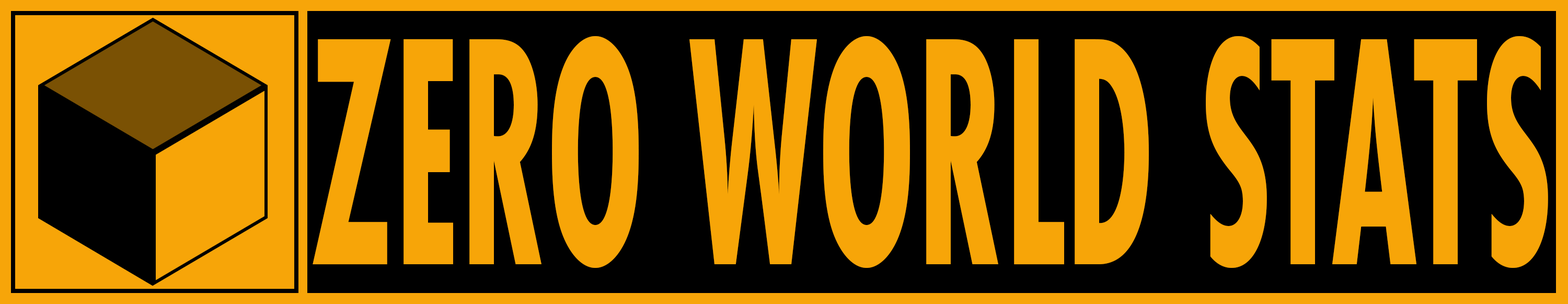
<style>
.page{position:relative;width:1568px;height:304px;background:#000000}
.page>*{position:absolute;margin:0}
.t1{font:337.1px "FuturaNewCondBold-Reg";color:#f7a508;scale:0.55 1}
</style>
<div class="page">
<p class="t1" style="left:313px;top:36px;width:1235px;height:232px">ZERO WORLD STATS</p>
</div>
